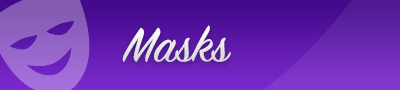
<style>
.page{position:relative;width:400px;height:90px}
.page>*{position:absolute;margin:0}
.t1{font:53.8px "SignPainter-HouseScript";color:#e6e6e6}
</style>
<div class="page">
<p class="t1" style="left:122px;top:25px;width:109px;height:37px">Masks</p>
</div>
